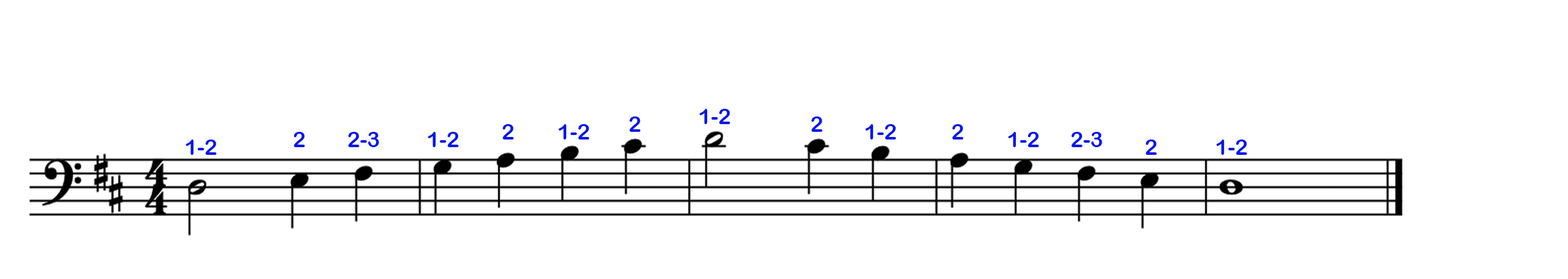
<style>
.page{position:relative;width:1568px;height:279px;background:#ffffff}
.page>*{position:absolute;margin:0}
.t1{font:21.8px "ArialRoundedMTBold";color:#0417ec}
</style>
<div class="page">
<p class="t1" style="left:699px;top:109px;width:31px;height:15px">1-2</p>
<p class="t1" style="left:502px;top:124px;width:12px;height:16px">2</p>
<p class="t1" style="left:559px;top:124px;width:30px;height:16px">1-2</p>
<p class="t1" style="left:629px;top:117px;width:12px;height:15px">2</p>
<p class="t1" style="left:811px;top:117px;width:11px;height:15px">2</p>
<p class="t1" style="left:865px;top:124px;width:31px;height:16px">1-2</p>
<p class="t1" style="left:952px;top:124px;width:11px;height:16px">2</p>
<p class="t1" style="left:293px;top:132px;width:12px;height:15px">2</p>
<p class="t1" style="left:348px;top:132px;width:31px;height:15px">2-3</p>
<p class="t1" style="left:428px;top:132px;width:31px;height:15px">1-2</p>
<p class="t1" style="left:1008px;top:132px;width:31px;height:15px">1-2</p>
<p class="t1" style="left:1071px;top:132px;width:31px;height:15px">2-3</p>
<p class="t1" style="left:186px;top:140px;width:30px;height:15px">1-2</p>
<p class="t1" style="left:1145px;top:140px;width:12px;height:15px">2</p>
<p class="t1" style="left:1216px;top:140px;width:31px;height:15px">1-2</p>
</div>
